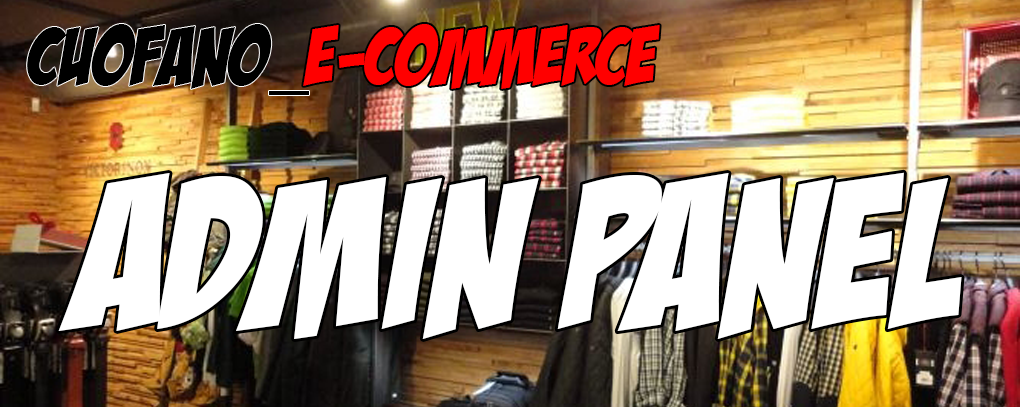
<style>
.page{position:relative;width:1020px;height:407px;background:#ffffff}
.page>*{position:absolute;margin:0}
.t1{font:79.8px "BadaBoomBB";color:#000000}
.t2{font:79.8px "MyriadPro-Regular";color:#000000}
.t3{font:79.8px "BadaBoomBB";color:#ff0000}
.t4{font:209.4px "BadaBoomBB";color:#ffffff}
</style>
<div class="page">
<p class="t1" style="left:27px;top:24px;width:282px;height:71px">Cuofano<span class="t2">_</span></p>
<p class="t3" style="left:303px;top:24px;width:357px;height:65px">e-commerce</p>
<p class="t4" style="left:58px;top:172px;width:904px;height:167px">ADMIN PANEL</p>
</div>
